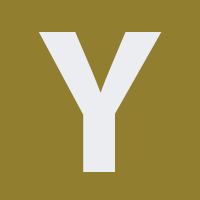
<style>
.page{position:relative;width:200px;height:200px;background:#917f2f}
.page>*{position:absolute;margin:0}
.t1{font:208.3px "MyriadPro-Bold";color:#ecedf1}
</style>
<div class="page">
<p class="t1" style="left:38px;top:32px;width:124px;height:140px">Y</p>
</div>
